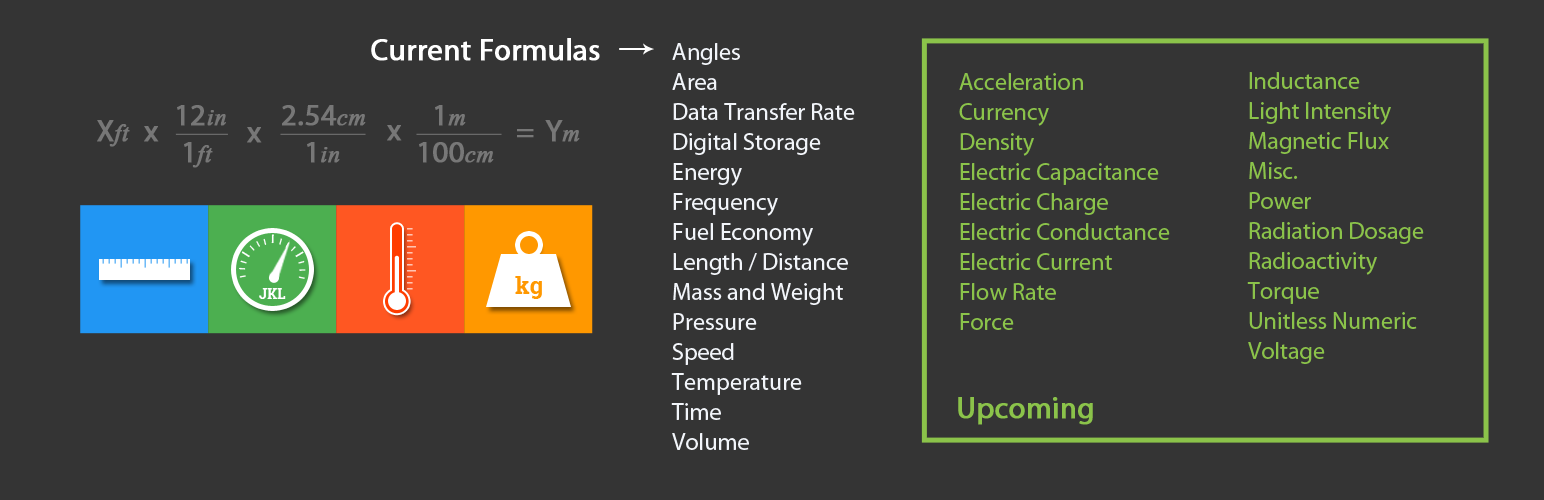
<style>
.page{position:relative;width:1544px;height:500px;background:#343434}
.page>*{position:absolute;margin:0}
.t1{font:30px "MyriadPro-Regular";color:#ffffff;font-weight:bold}
.t2{font:24px/30px "MyriadPro-Regular";color:#f2f5fa}
.t3{font:24px/30px "MyriadPro-Regular";color:#8bc34a}
.t4{font:30px "MyriadPro-Regular";color:#777777;font-weight:bold}
.t5{font:30px "Vijaya";color:#777777;font-weight:bold}
.t6{font:30px "MyriadPro-Regular";color:#8bc34a;font-weight:bold}
</style>
<div class="page">
<p class="t1" style="left:371px;top:38px;width:229px;height:23px">Current Formulas</p>
<p class="t2" style="left:671px;top:43px;width:184px;height:407px">Angles<br>Area<br>Data Transfer Rate<br>Digital Storage<br>Energy<br>Frequency<br>Fuel Economy<br>Length / Distance<br>Mass and Weight<br>Pressure<br>Speed<br>Temperature<br>Time<br>Volume</p>
<p class="t3" style="left:959px;top:73px;width:211px;height:257px">Acceleration<br>Currency<br>Density<br>Electric Capacitance<br>Electric Charge<br>Electric Conductance<br>Electric Current<br>Flow Rate<br>Force</p>
<p class="t3" style="left:1247px;top:72px;width:177px;height:292px">Inductance<br>Light Intensity<br>Magnetic Flux<br>Misc.<br>Power<br>Radiation Dosage<br>Radioactivity<br>Torque<br>Unitless Numeric<br>Voltage</p>
<p class="t4" style="left:177px;top:105px;width:49px;height:21px">12<span class="t5">in</span></p>
<p class="t4" style="left:282px;top:105px;width:84px;height:21px">2.54<span class="t5">cm</span></p>
<p class="t4" style="left:435px;top:105px;width:31px;height:21px">1<span class="t5">m</span></p>
<p class="t5" style="left:97px;top:120px;width:33px;height:27px"><span class="t4">X</span>ft</p>
<p class="t4" style="left:144px;top:126px;width:15px;height:16px">x</p>
<p class="t4" style="left:387px;top:125px;width:15px;height:16px">x</p>
<p class="t4" style="left:545px;top:120px;width:35px;height:22px">Y<span class="t5">m</span></p>
<p class="t4" style="left:247px;top:127px;width:15px;height:16px">x</p>
<p class="t4" style="left:517px;top:129px;width:17px;height:9px">=</p>
<p class="t5" style="left:184px;top:142px;width:29px;height:26px"><span class="t4">1</span>ft</p>
<p class="t5" style="left:307px;top:142px;width:33px;height:21px"><span class="t4">1</span>in</p>
<p class="t4" style="left:419px;top:142px;width:75px;height:21px">100<span class="t5">cm</span></p>
<p class="t6" style="left:958px;top:397px;width:135px;height:28px">Upcoming</p>
</div>
